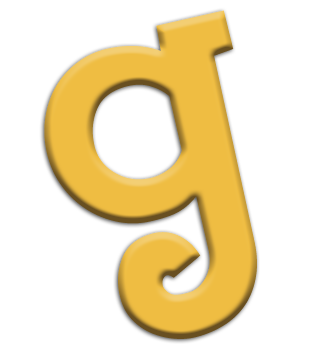
<style>
.page{position:relative;width:320px;height:352px;background:#ffffff}
.page>*{position:absolute;margin:0}
.t1{font:422px "FinkHeavy";color:#efbd42}
</style>
<div class="page">
<p class="t1" style="left:44px;top:10px;width:213px;height:329px;rotate:-14deg">g</p>
</div>
